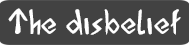
<style>
.page{position:relative;width:189px;height:45px;background:#424242}
.page>*{position:absolute;margin:0}
.t1{font:31.7px "AcadianRunes-Regular";color:#ffffff}
</style>
<div class="page">
<p class="t1" style="left:8px;top:8px;width:173px;height:27px">The disbelief</p>
</div>
